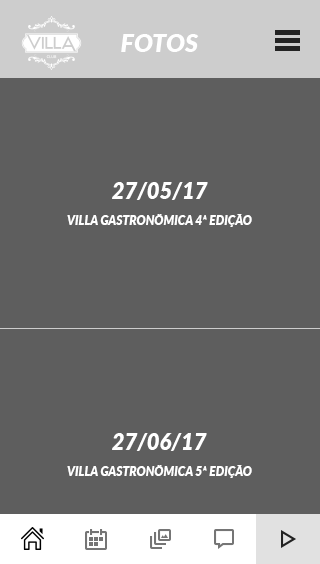
<style>
.page{position:relative;width:320px;height:564px;background:#5e5e5e}
.page>*{position:absolute;margin:0}
.t1{font:25.1px "Lato-BlackItalic";color:#ffffff;text-transform:uppercase}
.t2{font:22px "Lato-BlackItalic";color:#ffffff;text-transform:uppercase}
.t3{font:12px "Lato-BlackItalic";color:#ffffff;text-transform:uppercase}
</style>
<div class="page">
<p class="t1" style="left:121px;top:34px;width:78px;height:18px">fotos</p>
<p class="t2" style="left:112px;top:182px;width:96px;height:18px">27/05/17</p>
<p class="t3" style="left:67px;top:214px;width:185px;height:13px">villa gastronômica 4ª edição</p>
<p class="t2" style="left:112px;top:433px;width:95px;height:18px">27/06/17</p>
<p class="t3" style="left:67px;top:465px;width:185px;height:13px">villa gastronômica 5ª edição</p>
</div>
